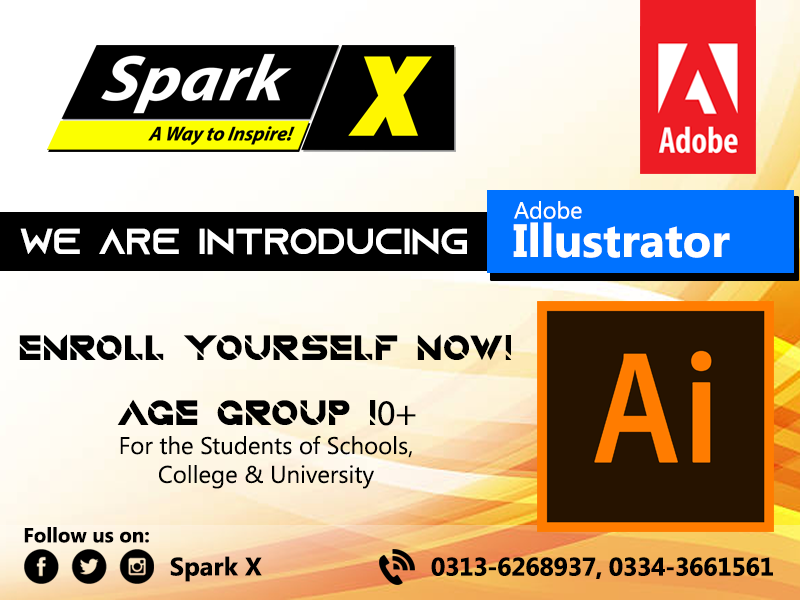
<style>
.page{position:relative;width:800px;height:600px}
.page>*{position:absolute;margin:0}
.t1{font:23.3px "SegoeUI";color:#ffffff}
.t2{font:46.6px "SegoeUI-Bold";color:#ffffff}
.t3{font:36px "AzonixRegular";color:#ffffff}
.t4{font:36px "QuantumRegular";color:#000000}
.t5{font:36px "MyriadPro-Regular";color:#000000}
.t6{font:24px "SegoeUI";color:#000000}
.t7{font:20.4px "SegoeUI-Bold";color:#000000}
.t8{font:25.5px "SegoeUI-Bold";color:#000000}
.t9{font:25.5px "SegoeUI-Bold";letter-spacing:-0.02em;color:#000000}
</style>
<div class="page">
<p class="t1" style="left:514px;top:201px;width:68px;height:18px">Adobe</p>
<p class="t2" style="left:513px;top:222px;width:217px;height:36px">Illustrator</p>
<p class="t3" style="left:20px;top:228px;width:447px;height:27px">WE ARE INTRODUCING</p>
<p class="t4" style="left:19px;top:334px;width:492px;height:26px">ENROLL YOURSELF NOW!</p>
<p class="t4" style="left:117px;top:399px;width:299px;height:27px">AGE GROUP !<span class="t5">0+</span></p>
<p class="t6" style="left:120px;top:435px;width:292px;height:54px;text-align:center">For the Students of Schools,<br>College &amp; University</p>
<p class="t7" style="left:24px;top:527px;width:125px;height:16px">Follow us on:</p>
<p class="t8" style="left:170px;top:556px;width:92px;height:26px">Spark X</p>
<p class="t9" style="left:431px;top:557px;width:342px;height:22px">0313-6268937, 0334-3661561</p>
</div>
